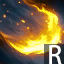
<style>
.page{position:relative;width:64px;height:64px}
.page>*{position:absolute;margin:0}
.t1{font:24px "AdobeFanHeitiStd-Bold";color:#ffffff}
</style>
<div class="page">
<p class="t1" style="left:49px;top:45px;width:13px;height:19px">R</p>
</div>
